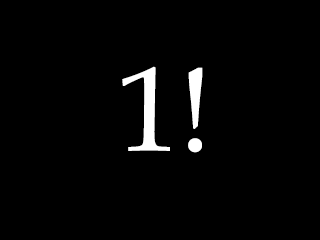
<style>
.page{position:relative;width:320px;height:240px;background:#000000}
.page>*{position:absolute;margin:0}
.t1{font:120px "BookAntiqua";color:#ffffff}
</style>
<div class="page">
<p class="t1" style="left:122px;top:66px;width:81px;height:87px">1!</p>
</div>
